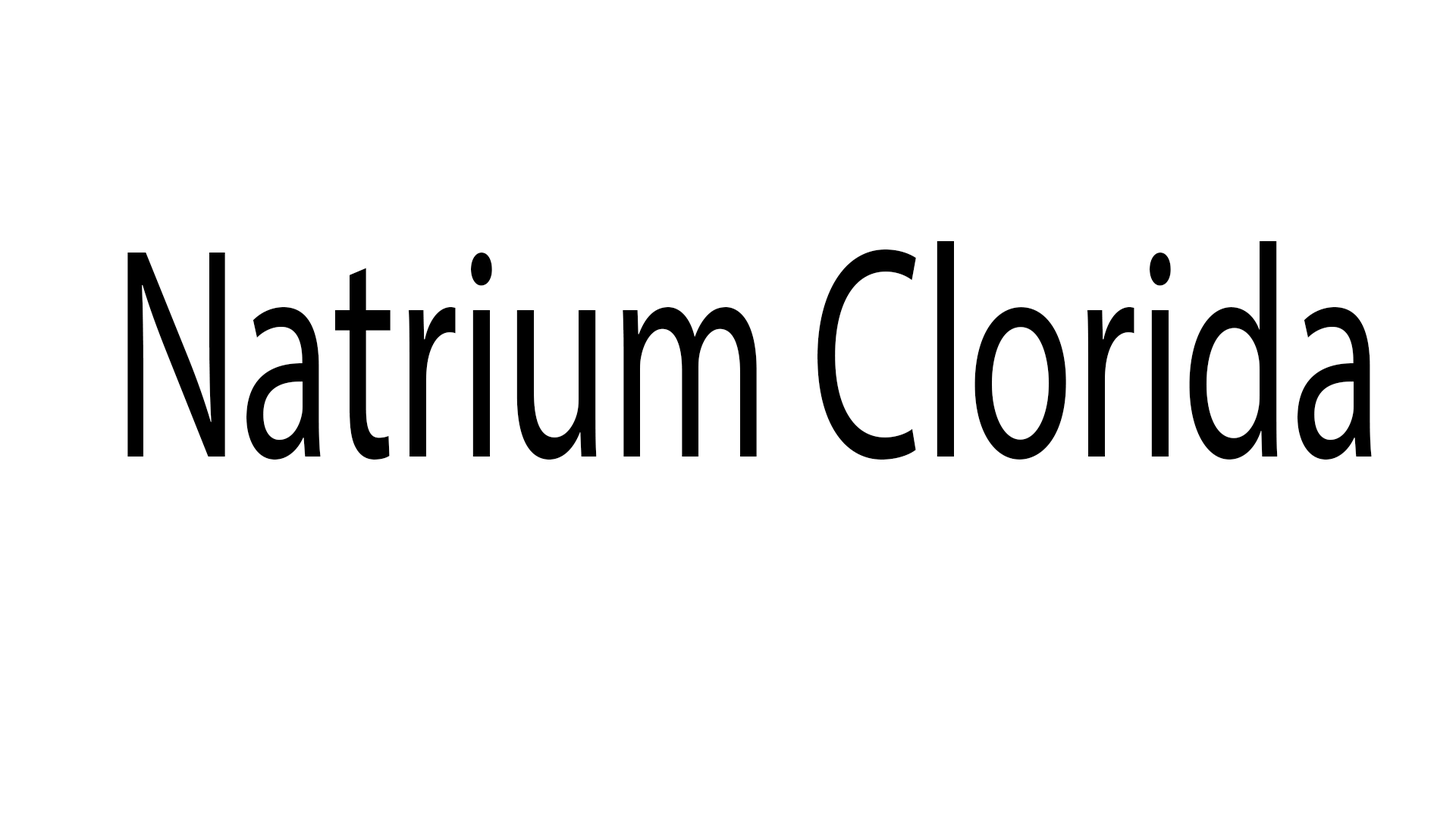
<style>
.page{position:relative;width:1456px;height:819px;background:#ffffff}
.page>*{position:absolute;margin:0}
.t1{font:302.9px "MyriadPro-Regular";color:#000000;scale:0.64 1}
</style>
<div class="page">
<p class="t1" style="left:127px;top:241px;width:1245px;height:219px">Natrium Clorida</p>
</div>
